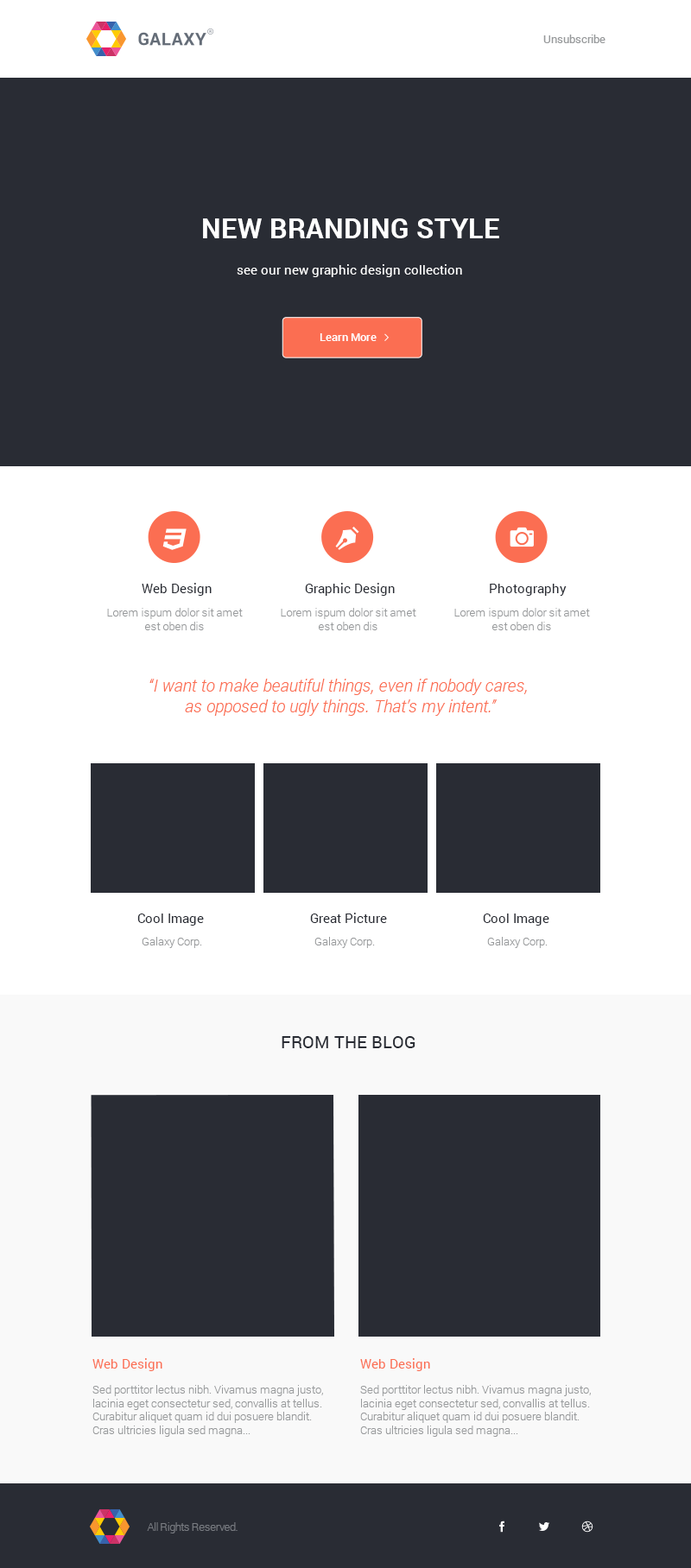
<style>
.page{position:relative;width:691px;height:1568px;background:#292c34}
.page>*{position:absolute;margin:0}
.t1{font:11.2px "Roboto-Regular";color:#97999b}
.t2{font:28px "Roboto-Bold";color:#ffffff}
.t3{font:13px "Roboto-Regular";color:#ffffff}
.t4{font:11.2px "Roboto-Medium";color:#ffffff}
.t5{font:13px "Roboto-Regular";color:#292c34}
.t6{font:11.2px "Roboto-Light";color:#97999b}
.t7{font:17.3px/20.7px "Roboto-LightItalic";color:#fb6e52}
.t8{font:17.3px "Roboto-Regular";color:#292c34}
.t9{font:13px "Roboto-Regular";color:#fb6e52}
.t10{font:11.2px "Roboto-Light";letter-spacing:-0.04em;color:#797c82}
</style>
<div class="page">
<p class="t1" style="left:543px;top:35px;width:62px;height:8px">Unsubscribe</p>
<p class="t2" style="left:203px;top:218px;width:296px;height:20px">NEW BRANDING STYLE</p>
<p class="t3" style="left:237px;top:264px;width:225px;height:13px">see our new graphic design collection</p>
<p class="t4" style="left:319px;top:333px;width:57px;height:8px">Learn More</p>
<p class="t5" style="left:142px;top:583px;width:70px;height:13px">Web Design</p>
<p class="t5" style="left:305px;top:583px;width:90px;height:13px">Graphic Design</p>
<p class="t5" style="left:490px;top:584px;width:76px;height:12px">Photography</p>
<p class="t6" style="left:107px;top:608px;width:136px;height:22px;text-align:center">Lorem ispum dolor sit amet<br>est oben dis</p>
<p class="t6" style="left:281px;top:608px;width:135px;height:22px;text-align:center">Lorem ispum dolor sit amet<br>est oben dis</p>
<p class="t6" style="left:454px;top:608px;width:136px;height:22px;text-align:center">Lorem ispum dolor sit amet<br>est oben dis</p>
<p class="t7" style="left:149px;top:679px;width:378px;height:37px;text-align:center">“I want to make beautiful things, even if nobody cares, <br>as opposed to ugly things. That’s my intent.”</p>
<p class="t5" style="left:137px;top:914px;width:67px;height:12px">Cool Image</p>
<p class="t5" style="left:310px;top:913px;width:77px;height:10px">Great Picture</p>
<p class="t5" style="left:483px;top:914px;width:66px;height:12px">Cool Image</p>
<p class="t6" style="left:142px;top:937px;width:60px;height:11px">Galaxy Corp.</p>
<p class="t6" style="left:314px;top:937px;width:61px;height:11px">Galaxy Corp.</p>
<p class="t6" style="left:487px;top:937px;width:60px;height:11px">Galaxy Corp.</p>
<p class="t8" style="left:281px;top:1036px;width:134px;height:12px">FROM THE BLOG</p>
<p class="t9" style="left:92px;top:1358px;width:70px;height:13px">Web Design</p>
<p class="t9" style="left:360px;top:1358px;width:70px;height:13px">Web Design</p>
<p class="t6" style="left:92px;top:1385px;width:231px;height:52px">Sed porttitor lectus nibh. Vivamus magna justo, <br>lacinia eget consectetur sed, convallis at tellus. <br>Curabitur aliquet quam id dui posuere blandit. <br>Cras ultricies ligula sed magna...</p>
<p class="t6" style="left:360px;top:1385px;width:231px;height:52px">Sed porttitor lectus nibh. Vivamus magna justo, <br>lacinia eget consectetur sed, convallis at tellus. <br>Curabitur aliquet quam id dui posuere blandit. <br>Cras ultricies ligula sed magna...</p>
<p class="t10" style="left:147px;top:1522px;width:90px;height:11px">All Rights Reserved.</p>
</div>
